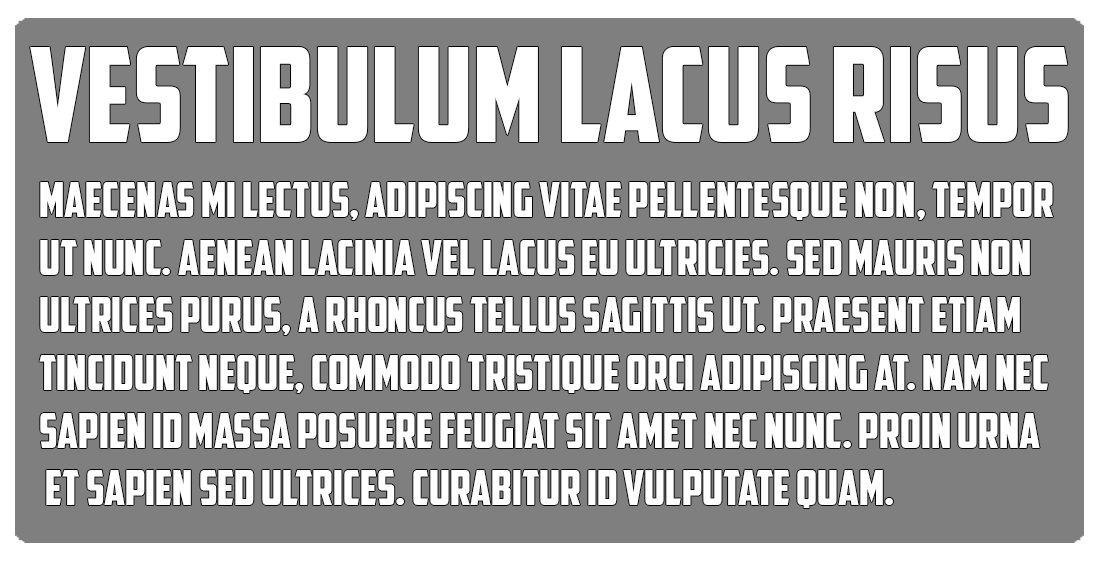
<style>
.page{position:relative;width:1100px;height:561px;background:#7f7f7f}
.page>*{position:absolute;margin:0}
.t1{font:131.2px "AmericanCaptain";color:#ffffff}
.t2{font:48px "AmericanCaptain";color:#ffffff}
</style>
<div class="page">
<p class="t1" style="left:30px;top:47px;width:1038px;height:95px">Vestibulum lacus risus</p>
<p class="t2" style="left:39px;top:182px;width:1014px;height:326px">Maecenas mi lectus, adipiscing vitae pellentesque non, tempor <br>ut nunc. Aenean lacinia vel lacus eu ultricies. Sed mauris non<br>ultrices purus, a rhoncus tellus sagittis ut. Praesent Etiam <br>tincidunt neque, commodo tristique orci adipiscing at. Nam nec <br>sapien id massa posuere feugiat sit amet nec nunc. Proin urna<br> et sapien sed ultrices. Curabitur id vulputate quam.</p>
</div>
